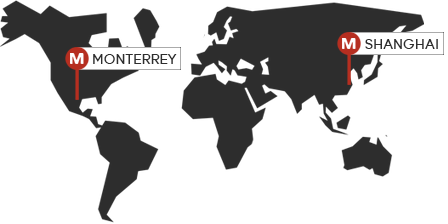
<style>
.page{position:relative;width:448px;height:224px;background:#ffffff}
.page>*{position:absolute;margin:0}
.t1{font:14px "Young";color:#2d2d2d}
.t2{font:14px "Young";color:#2e2e2e}
</style>
<div class="page">
<p class="t1" style="left:365px;top:39px;width:73px;height:10px">SHANGHAI</p>
<p class="t2" style="left:93px;top:54px;width:84px;height:10px">MONTERREY</p>
</div>
